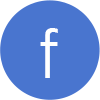
<style>
.page{position:relative;width:100px;height:100px;background:#4975cf}
.page>*{position:absolute;margin:0}
.t1{font:66.9px "CenturyGothic";color:#ffffff}
</style>
<div class="page">
<p class="t1" style="left:40px;top:28px;width:18px;height:50px">f</p>
</div>
